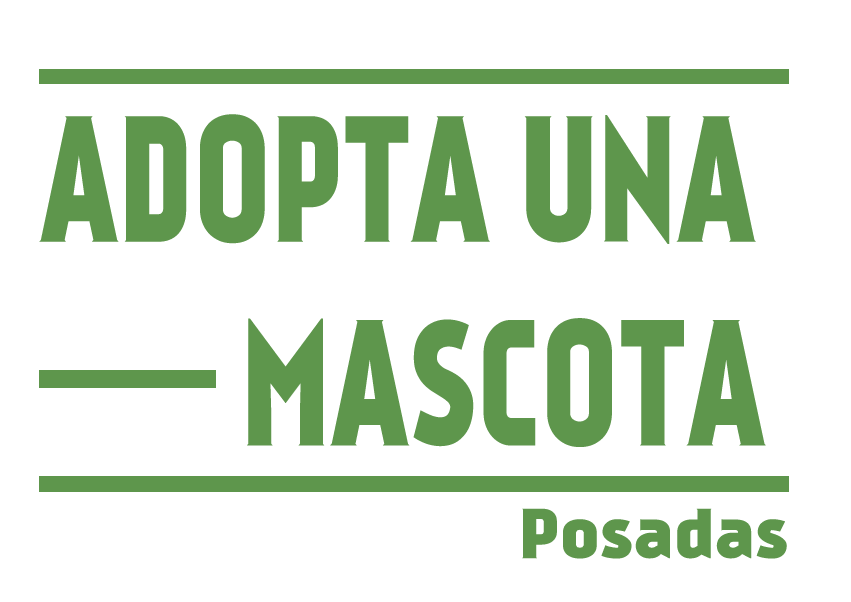
<style>
.page{position:relative;width:851px;height:602px;background:#ffffff}
.page>*{position:absolute;margin:0}
.t1{font:169.9px "Kankin";color:#5e964c;scale:0.83 1}
.t2{font:66.8px "Kankin";color:#5e964c;scale:1.21 1}
</style>
<div class="page">
<p class="t1" style="left:39px;top:114px;width:727px;height:333px">ADOPTA UNA<br>  MASCOTA</p>
<p class="t2" style="left:522px;top:508px;width:265px;height:51px">Posadas</p>
</div>
